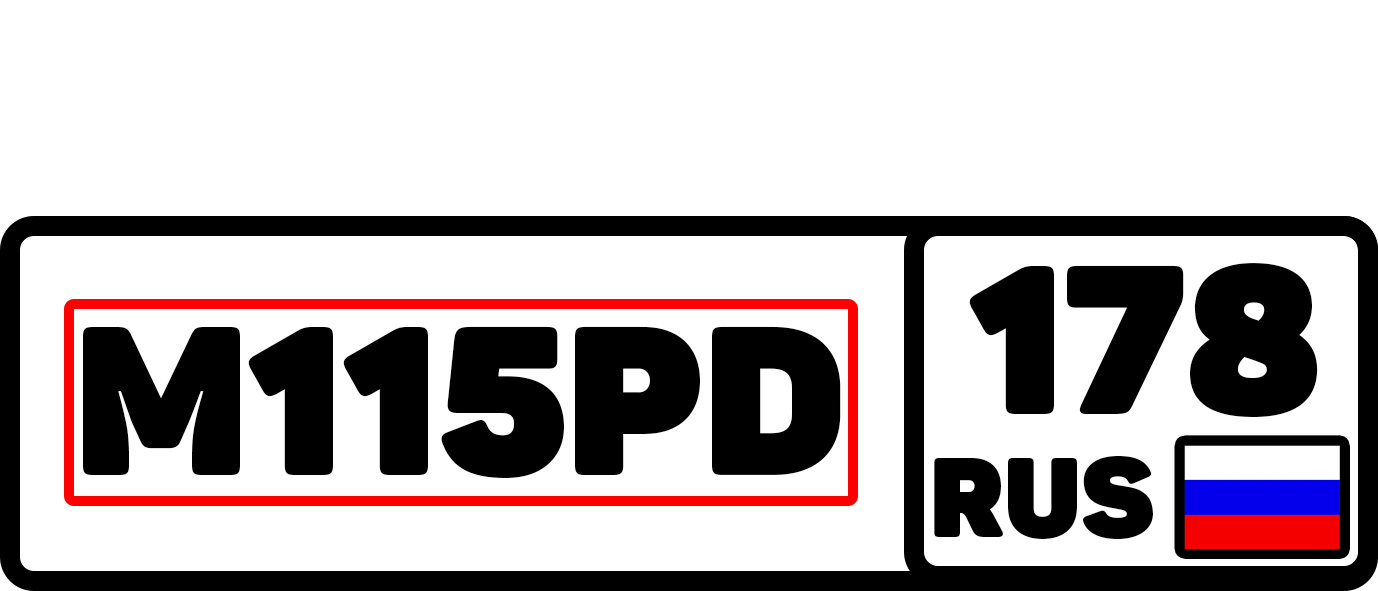
<style>
.page{position:relative;width:1378px;height:591px;background:#ffffff}
.page>*{position:absolute;margin:0}
.t1{font:208.3px "Panton-ExtraBlack";color:#000000;text-transform:uppercase}
.t2{font:111.1px "Panton-ExtraBlack";color:#000000;text-transform:uppercase}
</style>
<div class="page">
<p class="t1" style="left:969px;top:263px;width:349px;height:154px">178</p>
<p class="t1" style="left:83px;top:326px;width:758px;height:152px">M115PD</p>
<p class="t2" style="left:934px;top:455px;width:219px;height:84px">RUS</p>
</div>
